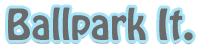
<style>
.page{position:relative;width:200px;height:50px;background:#ffffff}
.page>*{position:absolute;margin:0}
.t1{font:38px "HoboStd";color:#6b6b6b}
</style>
<div class="page">
<p class="t1" style="left:8px;top:7px;width:185px;height:34px">Ballpark It.</p>
</div>
